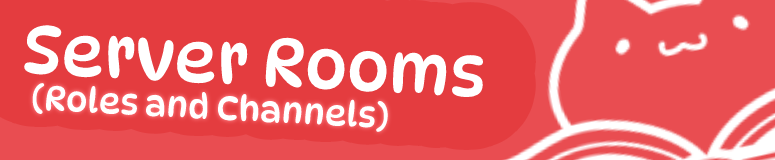
<style>
.page{position:relative;width:775px;height:160px;background:#e43c3f}
.page>*{position:absolute;margin:0}
.t1{font:67px "DynaPuff-Regular";color:#ffffff}
.t2{font:34px "DynaPuff-Regular";color:#ffffff}
</style>
<div class="page">
<p class="t1" style="left:24px;top:25px;width:459px;height:72px;rotate:3deg">Server Rooms</p>
<p class="t2" style="left:32px;top:83px;width:356px;height:49px;rotate:3deg">(Roles and Channels)</p>
</div>
